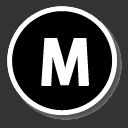
<style>
.page{position:relative;width:128px;height:128px;background:#333333}
.page>*{position:absolute;margin:0}
.t1{font:60px "AdobeGothicStd-Bold";color:#ffffff;font-weight:bold}
</style>
<div class="page">
<p class="t1" style="left:41px;top:38px;width:48px;height:48px">M</p>
</div>
